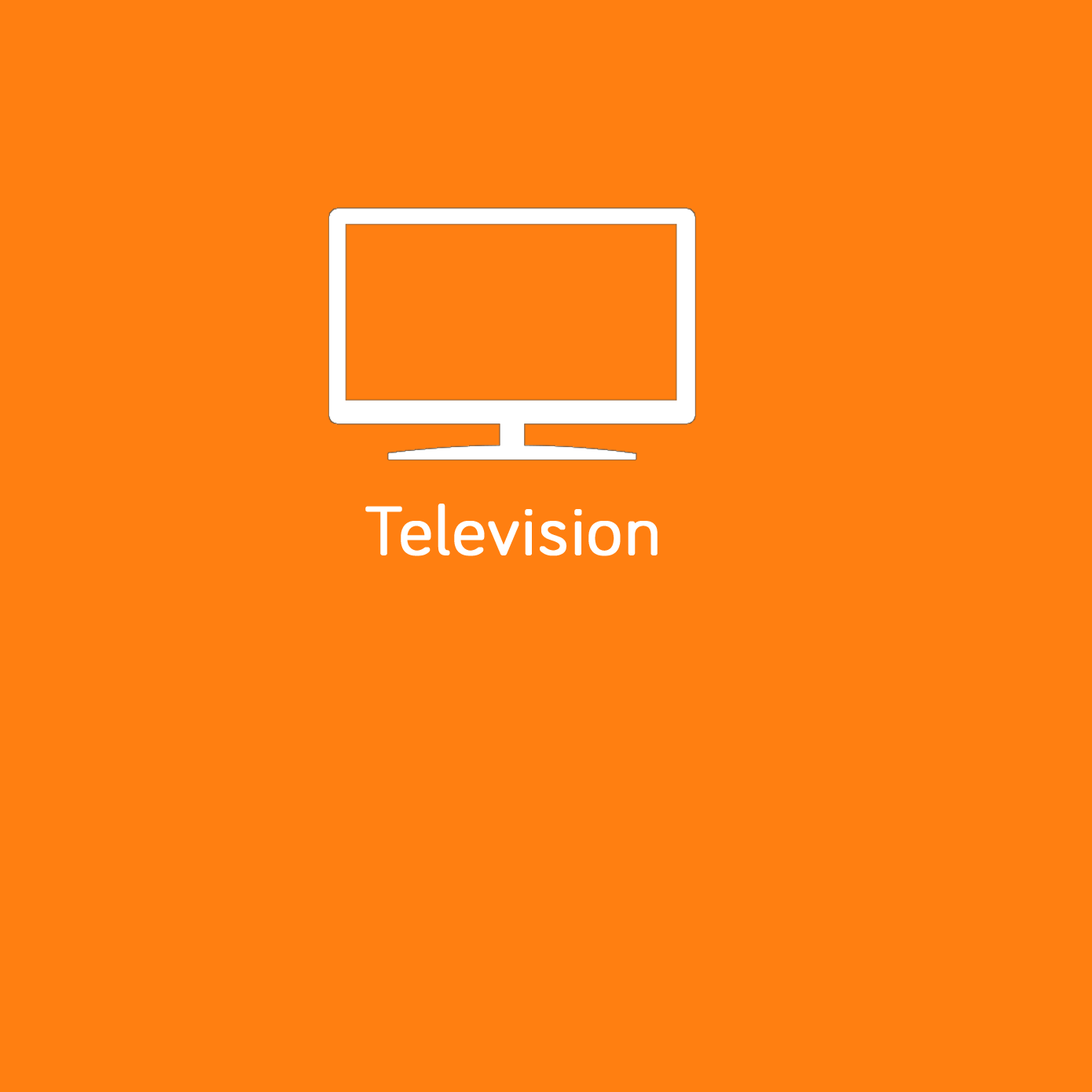
<style>
.page{position:relative;width:1092px;height:1092px;background:#ff7f11}
.page>*{position:absolute;margin:0}
.t1{font:70.7px "Bariol-Regular";letter-spacing:0.01em;color:#ffffff;font-weight:bold}
</style>
<div class="page">
<p class="t1" style="left:365px;top:504px;width:293px;height:52px">Television</p>
</div>
